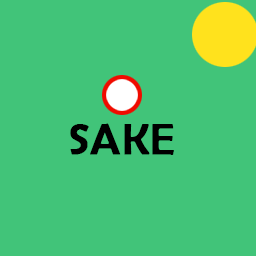
<style>
.page{position:relative;width:256px;height:256px;background:#41c479}
.page>*{position:absolute;margin:0}
.t1{font:44.1px "BerlinSansFB-Reg";letter-spacing:0.025em;color:#000000;font-weight:bold}
</style>
<div class="page">
<p class="t1" style="left:70px;top:123px;width:104px;height:32px">SAKE</p>
</div>
